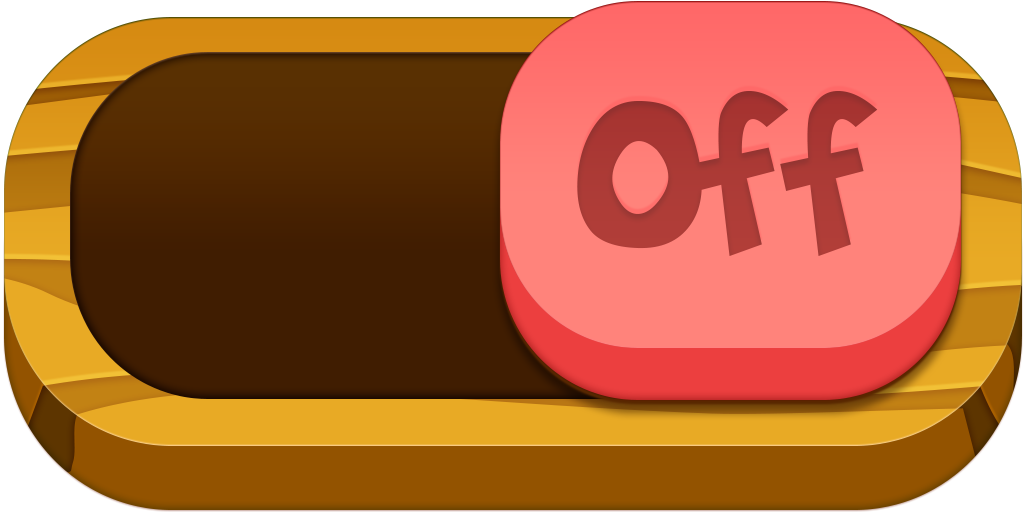
<style>
.page{position:relative;width:1024px;height:512px}
.page>*{position:absolute;margin:0}
.t1{font:250px "BradyBunchRemastered";color:#aa3935}
</style>
<div class="page">
<p class="t1" style="left:577px;top:91px;width:301px;height:165px">Off</p>
</div>
